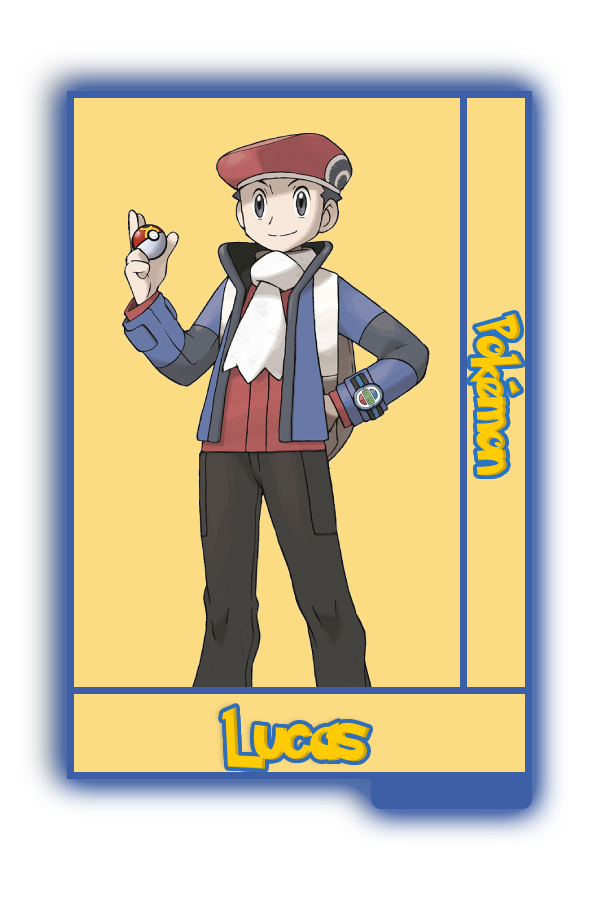
<style>
.page{position:relative;width:600px;height:900px;background:#fbdc83}
.page>*{position:absolute;margin:0}
.t1{font:48.8px "PokemonSolidNormal";color:#ffcb05;scale:0.8 1}
.t2{font:56.6px "PokemonSolidNormal";color:#ffcb05;scale:0.92 1}
</style>
<div class="page">
<p class="t1" style="left:469px;top:313px;width:54px;height:163px;rotate:90deg">Pokémon</p>
<p class="t2" style="left:221px;top:706px;width:149px;height:63px">Lucas</p>
</div>
